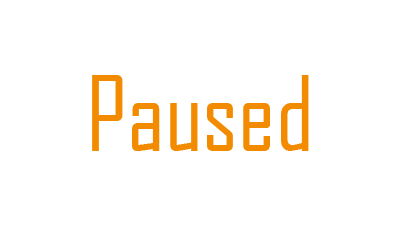
<style>
.page{position:relative;width:400px;height:225px;background:#ffffff}
.page>*{position:absolute;margin:0}
.t1{font:100px "AgencyFB-Reg";color:#f28b00}
</style>
<div class="page">
<p class="t1" style="left:92px;top:75px;width:217px;height:76px">Paused</p>
</div>
